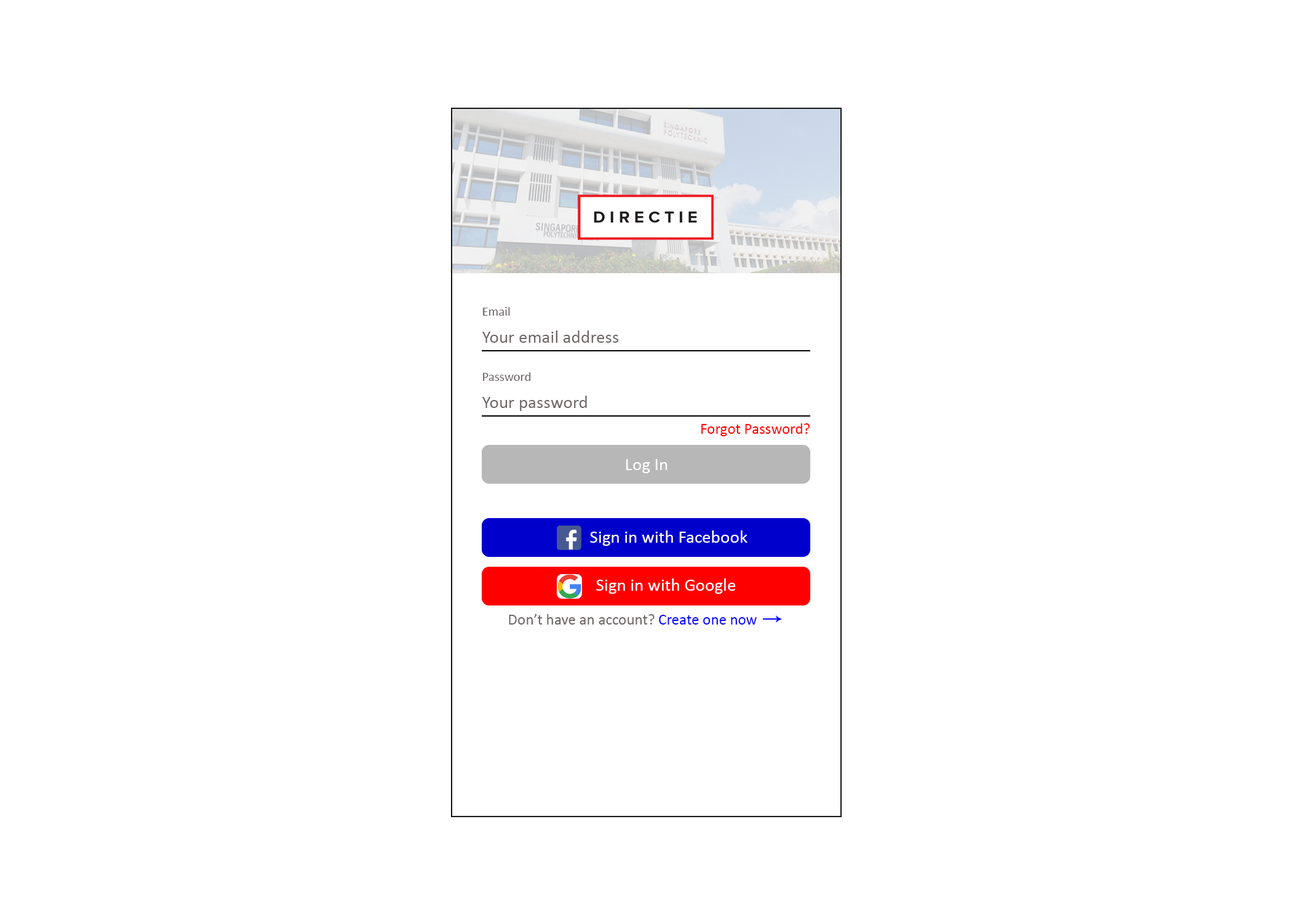
<style>
.page{position:relative;width:1292px;height:923px;background:#ffffff}
.page>*{position:absolute;margin:0}
.t1{font:12.8px "Calibri";color:#6f6767}
.t2{font:17.9px "Calibri";color:#6f6767}
.t3{font:15.4px "Calibri";color:#ff0000}
.t4{font:17.9px "Calibri";color:#ffffff}
.t5{font:15.4px "Calibri";color:#6f6767}
.t6{font:15.4px "Calibri";color:#0000ff}
</style>
<div class="page">
<p class="t1" style="left:483px;top:307px;width:27px;height:9px">Email</p>
<p class="t2" style="left:482px;top:330px;width:137px;height:13px">Your email address</p>
<p class="t1" style="left:483px;top:372px;width:48px;height:9px">Password</p>
<p class="t2" style="left:482px;top:396px;width:105px;height:15px">Your password</p>
<p class="t3" style="left:701px;top:423px;width:109px;height:13px">Forgot Password?</p>
<p class="t4" style="left:626px;top:459px;width:42px;height:14px">Log In</p>
<p class="t4" style="left:590px;top:530px;width:158px;height:16px">Sign in with Facebook</p>
<p class="t4" style="left:596px;top:578px;width:139px;height:16px">Sign in with Google</p>
<p class="t5" style="left:509px;top:614px;width:248px;height:10px">Don’t have an account? <span class="t6">Create one now</span></p>
</div>
